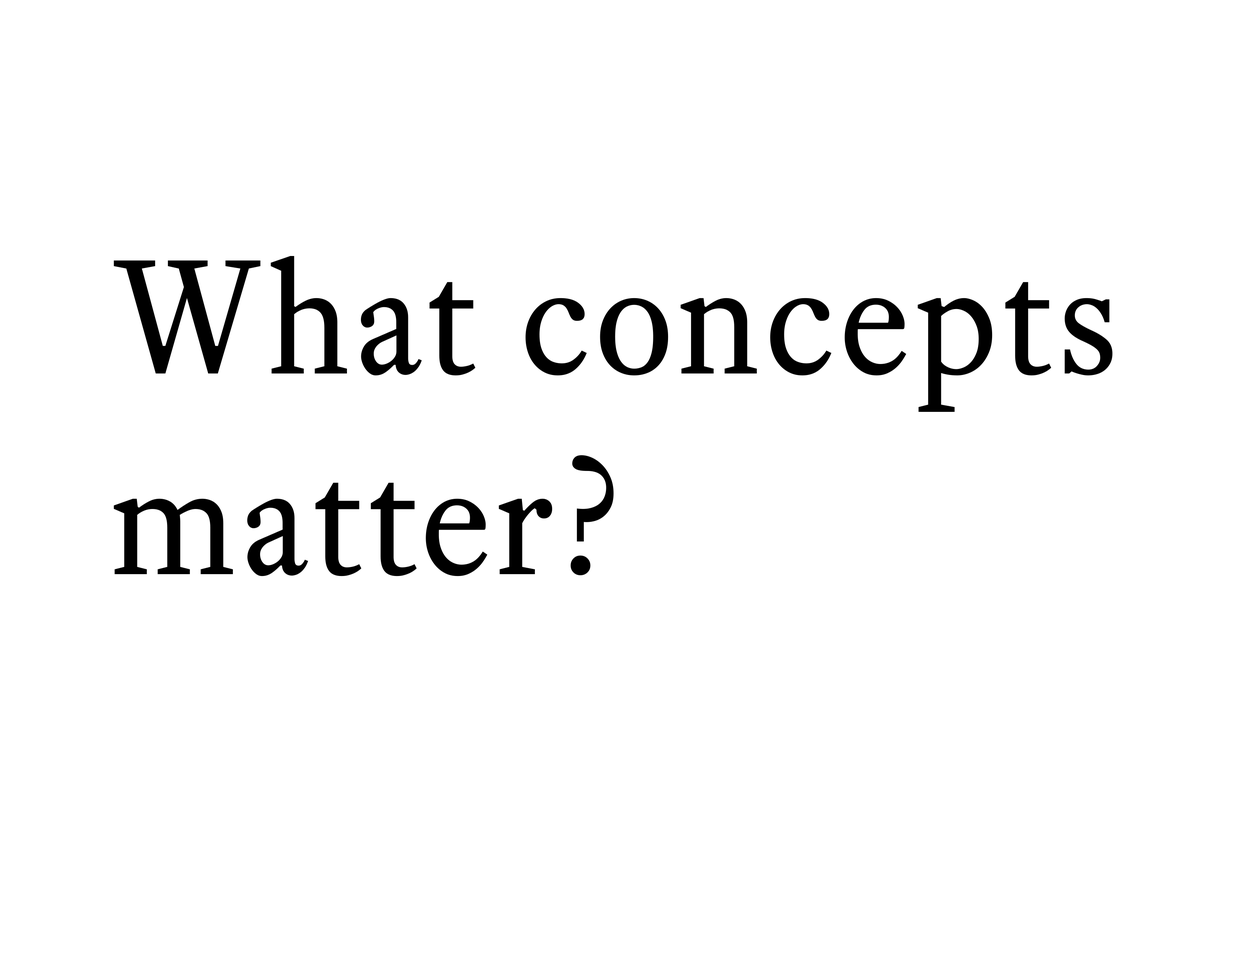
<style>
.page{position:relative;width:1242px;height:960px;background:#ffffff}
.page>*{position:absolute;margin:0}
.t1{font:160px/200.8px "EquityTextB";letter-spacing:0.025em;color:#000000}
</style>
<div class="page">
<p class="t1" style="left:114px;top:256px;width:999px;height:320px">What concepts<br>matter?</p>
</div>
